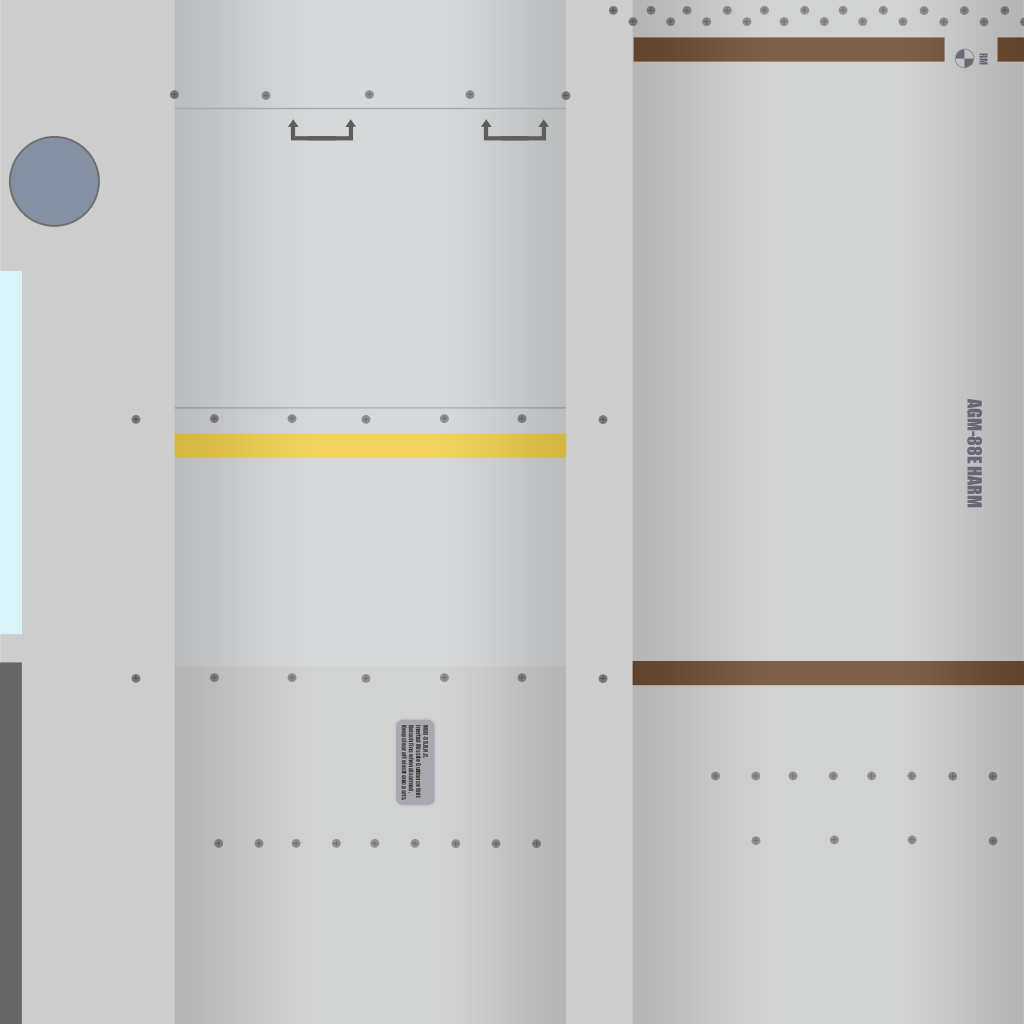
<style>
.page{position:relative;width:1024px;height:1024px;background:#cdcdcd}
.page>*{position:absolute;margin:0}
.t1{font:10px "Impact";color:#5a5b6e}
.t2{font:18px "Impact";color:#5a5b6e}
.t3{font:6px "Impact";color:#323233}
</style>
<div class="page">
<p class="t1" style="left:979px;top:53px;width:9px;height:12px;rotate:90deg">RM</p>
<p class="t2" style="left:967px;top:399px;width:15px;height:109px;rotate:90deg">AGM-88E HARM</p>
<p class="t3" style="left:401px;top:725px;width:27px;height:75px;rotate:90deg">MGU-35.B.N.C. <br>Inertial Missile Guidance Unit <br>Detach fins when disarmed. <br>Keep clear off electronic parts.</p>
</div>
